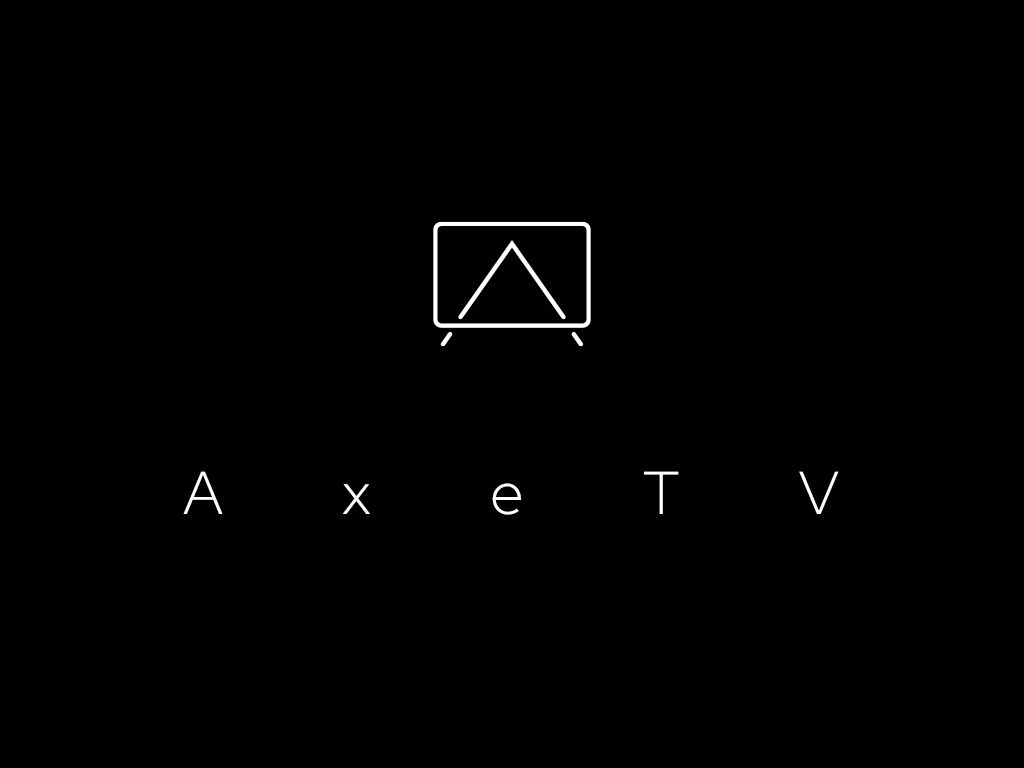
<style>
.page{position:relative;width:1024px;height:768px;background:#000000}
.page>*{position:absolute;margin:0}
.t1{font:60px "RedHatDisplay-Light";letter-spacing:2em;color:#ffffff}
</style>
<div class="page">
<p class="t1" style="left:183px;top:471px;width:656px;height:44px">AxeTV</p>
</div>
